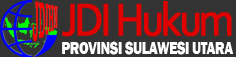
<style>
.page{position:relative;width:236px;height:57px;background:#333333}
.page>*{position:absolute;margin:0}
.t1{font:48.1px "Corbel";letter-spacing:-0.084em;color:#e00000;font-weight:bold;scale:0.89 1}
.t2{font:18.4px "FranklinGothic-Heavy";letter-spacing:-0.04em;color:#ffffff;scale:0.77 1}
</style>
<div class="page">
<p class="t1" style="left:62px;top:1px;width:170px;height:36px">JDI Hukum</p>
<p class="t2" style="left:62px;top:41px;width:172px;height:14px">PROVINSI SULAWESI UTARA</p>
</div>
